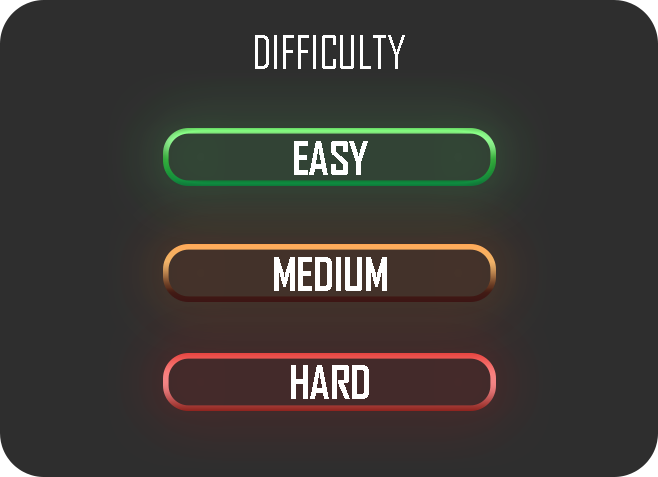
<style>
.page{position:relative;width:658px;height:477px;background:#2e2e2e}
.page>*{position:absolute;margin:0}
.t1{font:44px "AgencyFB-Reg";color:#ffffff}
.t2{font:44px "AgencyFB-Bold";color:#ffffff}
</style>
<div class="page">
<p class="t1" style="left:255px;top:35px;width:150px;height:34px">DIFFICULTY</p>
<p class="t2" style="left:294px;top:141px;width:74px;height:34px">EASY</p>
<p class="t2" style="left:274px;top:257px;width:113px;height:34px">MEDIUM</p>
<p class="t2" style="left:291px;top:365px;width:78px;height:34px">HARD</p>
</div>
